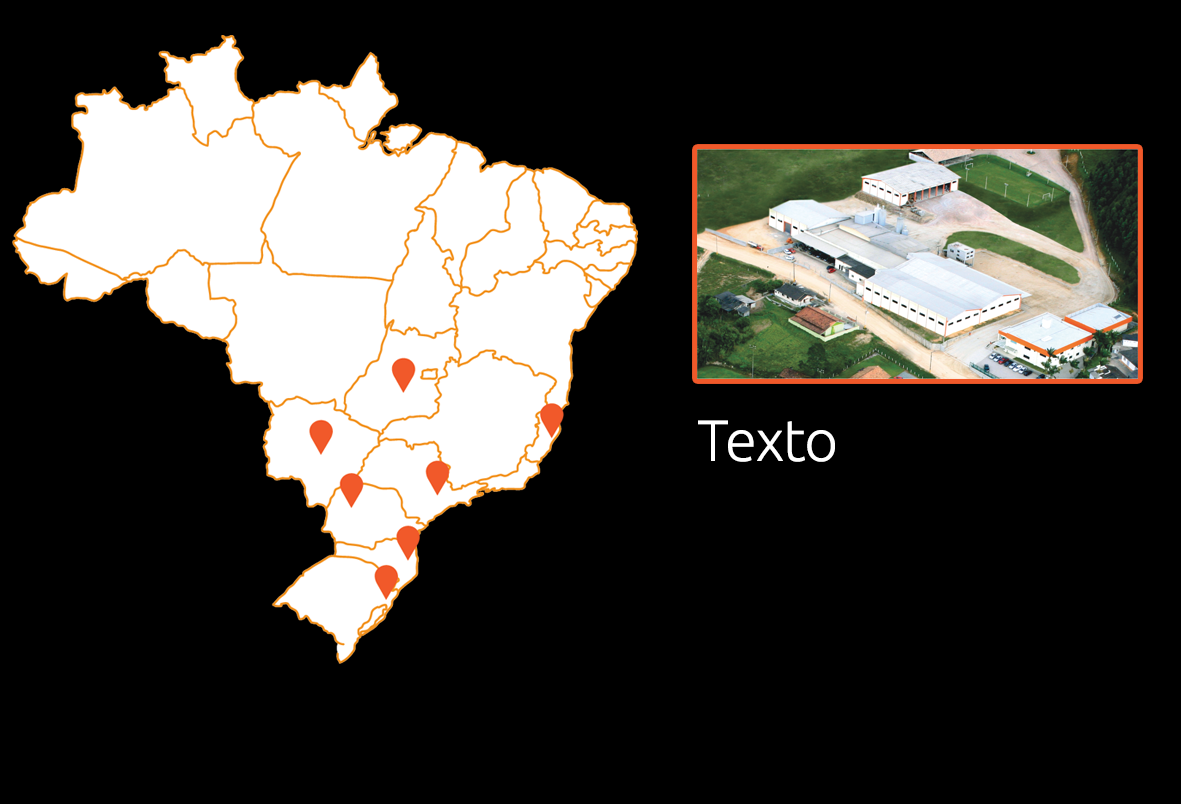
<style>
.page{position:relative;width:1181px;height:804px;background:#000000}
.page>*{position:absolute;margin:0}
.t1{font:58.3px "Ubuntu-Light";letter-spacing:-0.025em;color:#ffffff}
</style>
<div class="page">
<p class="t1" style="left:698px;top:420px;width:137px;height:42px">Texto</p>
</div>
